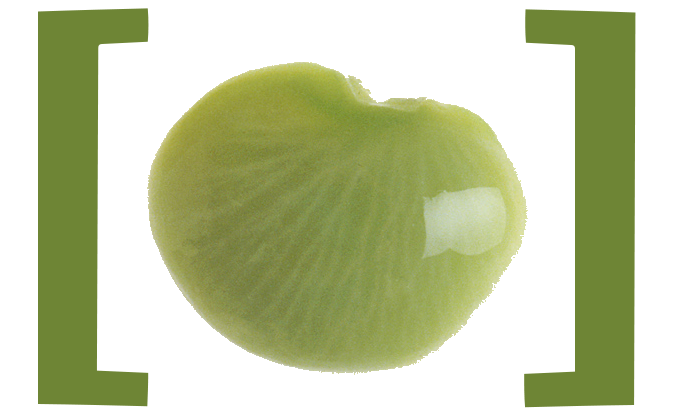
<style>
.page{position:relative;width:674px;height:416px;background:#ffffff}
.page>*{position:absolute;margin:0}
.t1{font:450px "ChaparralPro-Bold";color:#6e8535}
</style>
<div class="page">
<p class="t1" style="left:38px;top:8px;width:111px;height:399px;text-align:right">[<br>v</p>
<p class="t1" style="left:524px;top:9px;width:112px;height:399px">]t</p>
</div>
